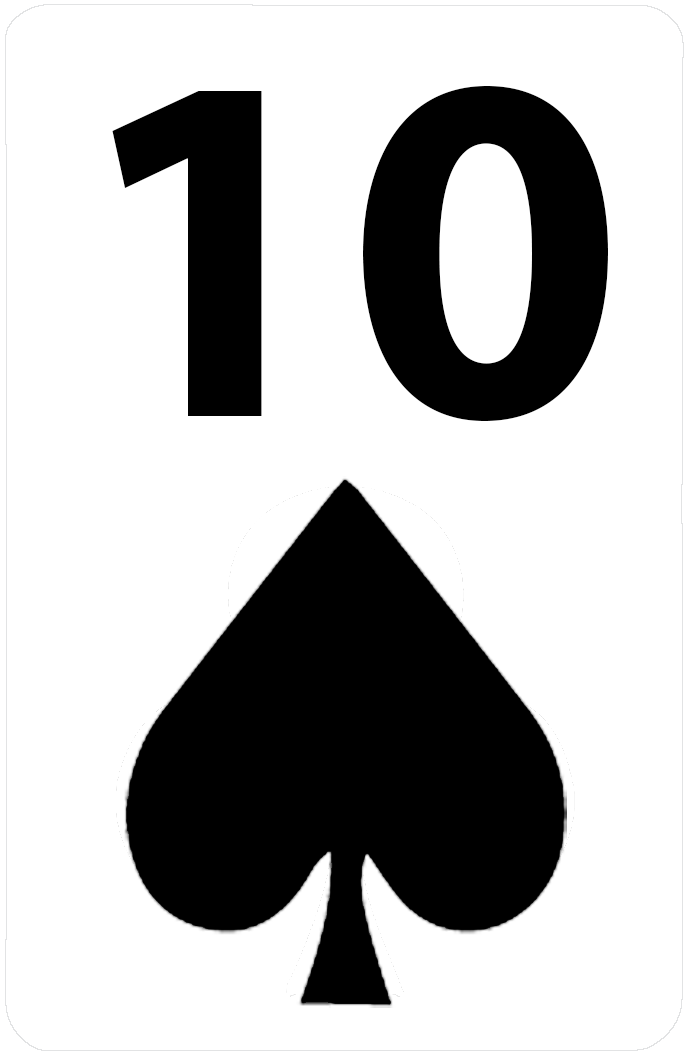
<style>
.page{position:relative;width:691px;height:1056px;background:#ffffff}
.page>*{position:absolute;margin:0}
.t1{font:500px "MyriadPro-Bold";color:#000000}
</style>
<div class="page">
<p class="t1" style="left:112px;top:86px;width:496px;height:335px">10</p>
</div>
